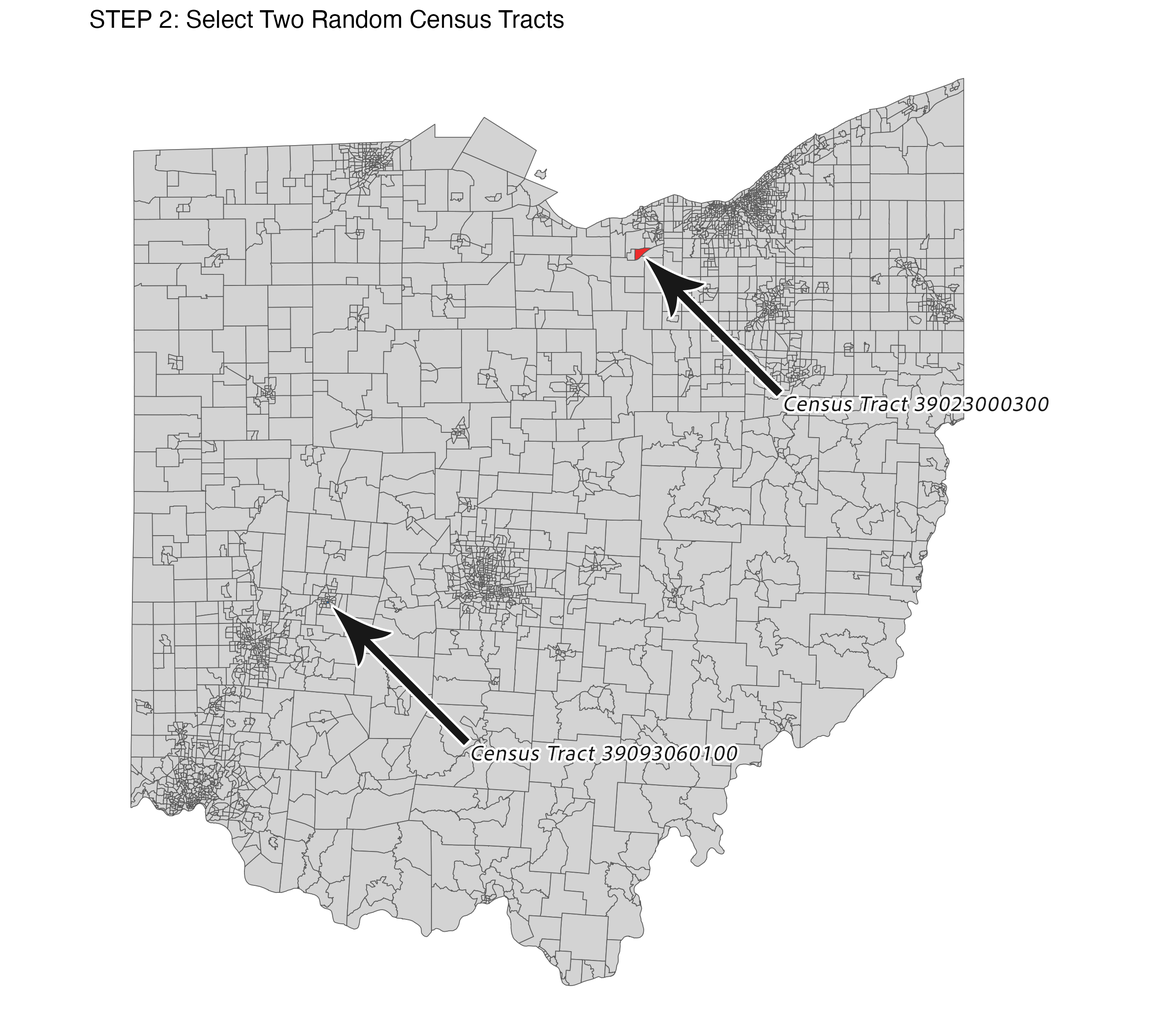
<style>
.page{position:relative;width:1156px;height:1031px;background:#ffffff}
.page>*{position:absolute;margin:0}
.t1{font:22.1px "AdobeClean-Regular";letter-spacing:0.05em;color:#181818;font-style:italic}
.t2{font:22.1px "MyriadPro-Regular";letter-spacing:0.05em;color:#181818;font-style:italic}
</style>
<div class="page">
<p class="t1" style="left:785px;top:396px;width:264px;height:16px">Census Tract 39023000300</p>
<p class="t1" style="left:472px;top:746px;width:265px;height:15px">Census Tract <span class="t2">39093060100</span></p>
</div>
